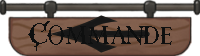
<style>
.page{position:relative;width:200px;height:56px}
.page>*{position:absolute;margin:0}
.t1{font:30.3px "RoseKnight-Regular";color:#0e0f0f}
</style>
<div class="page">
<p class="t1" style="left:28px;top:21px;width:144px;height:30px">Commande</p>
</div>
